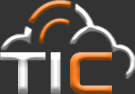
<style>
.page{position:relative;width:135px;height:94px;background:#333333}
.page>*{position:absolute;margin:0}
.t1{font:58.2px "Audiowide-Regular";font-weight:bold;scale:1.09 1}
</style>
<div class="page">
<p class="t1" style="left:0px;top:52px;width:112px;height:42px">TIC</p>
</div>
